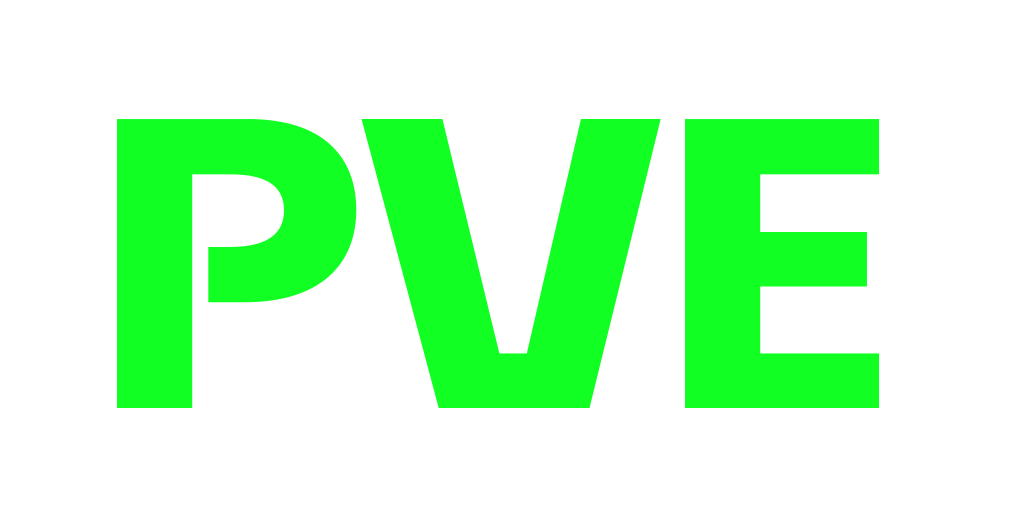
<style>
.page{position:relative;width:1024px;height:512px;background:#ffffff}
.page>*{position:absolute;margin:0}
.t1{font:404.2px "EcoSansPro-83HeavyExtended";letter-spacing:0.02em;color:#11ff22}
</style>
<div class="page">
<p class="t1" style="left:117px;top:119px;width:763px;height:289px">PVE</p>
</div>
